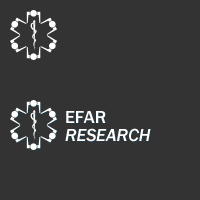
<style>
.page{position:relative;width:200px;height:200px;background:#333333}
.page>*{position:absolute;margin:0}
.t1{font:18px/18px "FranklinGothic-MediumItalic";color:#ffffff}
.t2{font:18px/18px "FranklinGothic-Medium";color:#ffffff}
</style>
<div class="page">
<p class="t1" style="left:65px;top:111px;width:86px;height:31px"><span class="t2">EFAR<br></span>RESEARCH</p>
</div>
